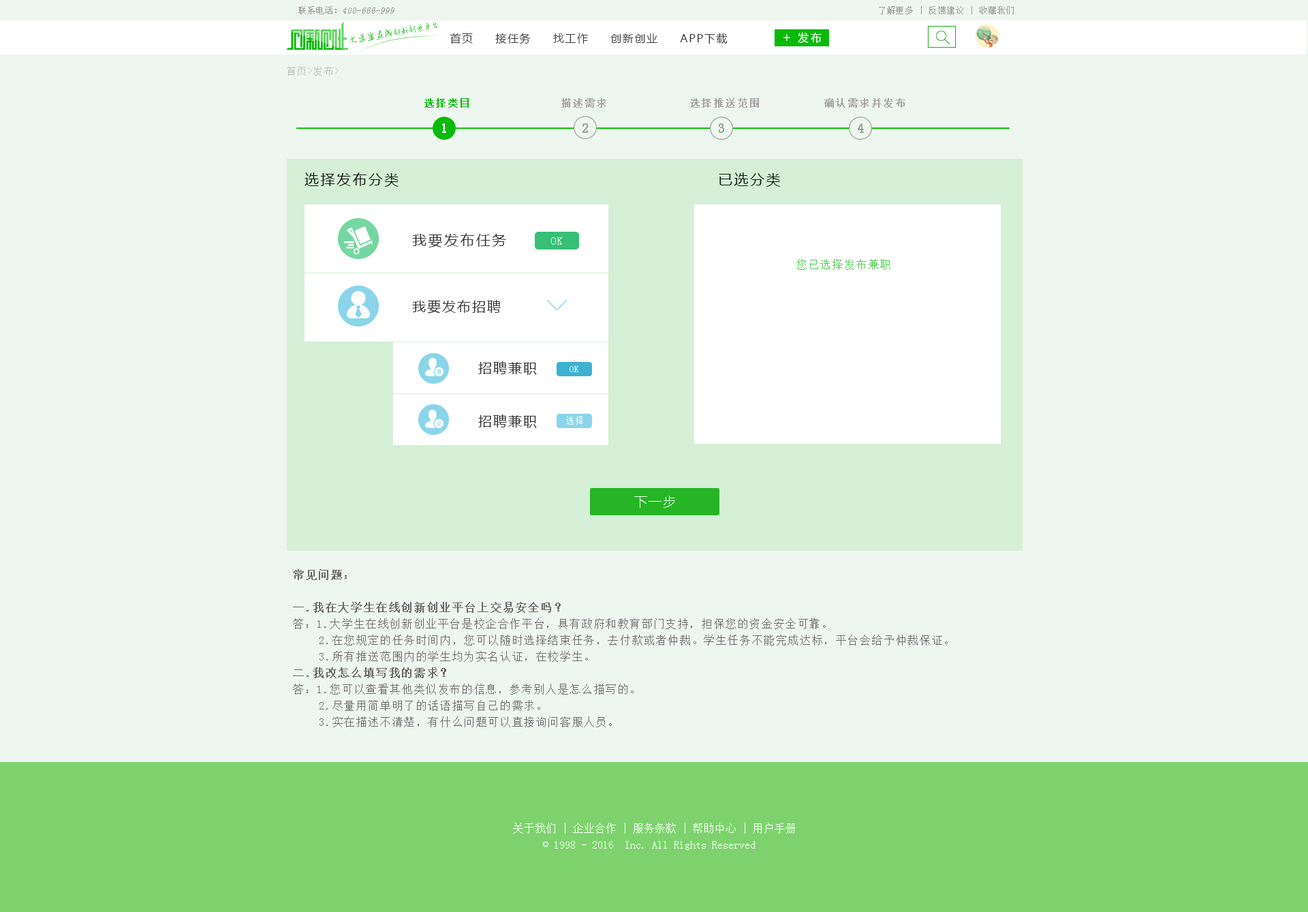
<style>
.page{position:relative;width:1308px;height:912px;background:#eef6f0}
.page>*{position:absolute;margin:0}
.t1{font:9.1px "SimSun";color:#959595;font-style:italic}
.t2{font:9.1px "SimSun";color:#959595}
.t3{font:8.2px "SimSun";letter-spacing:0.1em;color:#959494}
.t4{font:8.4px "AnJingCheng-Xing-2.0";letter-spacing:-0.01em;color:#09ba08}
.t5{font:9.5px "AnJingCheng-Xing-2.0";letter-spacing:-0.01em;color:#09ba08}
.t6{font:10.9px "MicrosoftYaHei";letter-spacing:0.1em;color:#3e3e3e}
.t7{font:12.7px "MicrosoftYaHei";letter-spacing:0.2em;color:#ffffff}
.t8{font:10.9px "MicrosoftYaHei";letter-spacing:0.2em;color:#ffffff}
.t9{font:9.5px "SimSun";letter-spacing:0.1em;color:#bebebe}
.t10{font:10px "SimSun";letter-spacing:0.1em;color:#09ba08;font-weight:bold}
.t11{font:10px "SimSun";letter-spacing:0.1em;color:#a2a2a2;font-weight:bold}
.t12{font:9.9px "SimSun";letter-spacing:0.1em;color:#a2a2a2;font-weight:bold}
.t13{font:12.6px "SimSun";letter-spacing:0.1em;color:#ffffff;font-weight:bold}
.t14{font:12.6px "SimSun";letter-spacing:0.1em;color:#a2a2a2;font-weight:bold}
.t15{font:12.8px "SimSun";letter-spacing:0.1em;color:#a2a2a2;font-weight:bold}
.t16{font:14.5px "MicrosoftYaHei";letter-spacing:0.1em;color:#121212}
.t17{font:14.5px "MicrosoftYaHei";letter-spacing:0.1em;color:#353535}
.t18{font:10.9px "SimSun";letter-spacing:0.1em;color:#ffffff}
.t19{font:10.9px "SimSun";letter-spacing:0.1em;color:#4bc84b}
.t20{font:13.6px "MicrosoftYaHei";letter-spacing:0.1em;color:#353535}
.t21{font:8.8px "SimSun";letter-spacing:0.1em;color:#ffffff}
.t22{font:12.7px "MicrosoftYaHei";letter-spacing:0.1em;color:#ffffff}
.t23{font:10.9px/16.3px "SimSun";letter-spacing:0.1em;color:#696969}
.t24{font:10.9px/16.3px "SimSun";letter-spacing:0.1em;color:#696969;font-weight:bold}
.t25{font:10.9px/16.4px "SimSun";color:#ffffff}
</style>
<div class="page">
<p class="t1" style="left:298px;top:6px;width:96px;height:8px"><span class="t2">联系电话：</span>400-666-999</p>
<p class="t3" style="left:879px;top:6px;width:135px;height:8px">了解更多 | 反馈建议 | 收藏我们</p>
<p class="t4" style="left:350px;top:21px;width:88px;height:22px;rotate:-10deg"><span class="t5">大学生在线</span>创新创业平台</p>
<p class="t6" style="left:450px;top:33px;width:278px;height:11px">首页     接任务     找工作     创新创业     APP下载</p>
<p class="t7" style="left:783px;top:34px;width:7px;height:7px">+</p>
<p class="t8" style="left:798px;top:32px;width:24px;height:11px">发布</p>
<p class="t9" style="left:287px;top:66px;width:52px;height:10px">首页&gt;发布&gt;</p>
<p class="t10" style="left:424px;top:98px;width:45px;height:10px">选择类目</p>
<p class="t11" style="left:561px;top:98px;width:45px;height:10px">描述需求</p>
<p class="t12" style="left:690px;top:98px;width:69px;height:10px">选择推送范围</p>
<p class="t12" style="left:824px;top:98px;width:81px;height:10px">确认需求并发布</p>
<p class="t13" style="left:442px;top:123px;width:4px;height:10px">1</p>
<p class="t14" style="left:583px;top:123px;width:5px;height:10px">2</p>
<p class="t14" style="left:719px;top:123px;width:5px;height:10px">3</p>
<p class="t15" style="left:858px;top:123px;width:6px;height:10px">4</p>
<p class="t16" style="left:305px;top:172px;width:94px;height:15px">选择发布分类</p>
<p class="t16" style="left:719px;top:172px;width:62px;height:15px">已选分类</p>
<p class="t17" style="left:412px;top:233px;width:94px;height:14px">我要发布任务</p>
<p class="t18" style="left:551px;top:237px;width:11px;height:8px">OK</p>
<p class="t19" style="left:796px;top:259px;width:94px;height:11px">您已选择发布兼职</p>
<p class="t20" style="left:412px;top:300px;width:89px;height:13px">我要发布招聘</p>
<p class="t20" style="left:478px;top:361px;width:59px;height:14px">招聘兼职</p>
<p class="t21" style="left:570px;top:366px;width:8px;height:6px">OK</p>
<p class="t20" style="left:478px;top:414px;width:59px;height:14px">招聘兼职</p>
<p class="t21" style="left:566px;top:416px;width:17px;height:8px">选择</p>
<p class="t22" style="left:634px;top:495px;width:41px;height:13px">下一步</p>
<p class="t23" style="left:293px;top:569px;width:655px;height:158px"><span class="t24">常见问题：<br><br>一.我在大学生在线创新创业平台上交易安全吗？<br></span>答：1.大学生在线创新创业平台是校企合作平台，具有政府和教育部门支持，担保您的资金安全可靠。<br>    2.在您规定的任务时间内，您可以随时选择结束任务，去付款或者仲裁。学生任务不能完成达标，平台会给予仲裁保证。<br>    3.所有推送范围内的学生均为实名认证，在校学生。<br><span class="t24">二.我改怎么填写我的需求？<br></span>答：1.您可以查看其他类似发布的信息，参考别人是怎么描写的。<br>    2.尽量用简单明了的话语描写自己的需求。<br>    3.实在描述不清楚，有什么问题可以直接询问客服人员。</p>
<p class="t25" style="left:513px;top:822px;width:283px;height:28px;text-align:center">关于我们 | 企业合作 | 服务条款 | 帮助中心 | 用户手册<br>© 1998 - 2016  Inc. All Rights Reserved</p>
</div>
